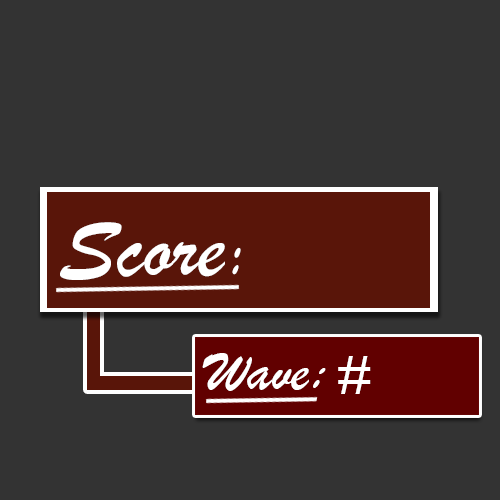
<style>
.page{position:relative;width:500px;height:500px;background:#333333}
.page>*{position:absolute;margin:0}
.t1{font:90px "BrushScriptMT";color:#ffffff}
.t2{font:72px "BrushScriptMT";color:#ffffff}
.t3{font:60px "BrushScriptMT";color:#ffffff}
.t4{font:60.1px "BrushScriptMT";color:#ffffff}
</style>
<div class="page">
<p class="t1" style="left:60px;top:222px;width:165px;height:58px">Score</p>
<p class="t2" style="left:232px;top:247px;width:9px;height:28px;rotate:-18deg">:</p>
<p class="t3" style="left:202px;top:353px;width:107px;height:38px">Wave</p>
<p class="t3" style="left:338px;top:356px;width:33px;height:38px">#</p>
<p class="t4" style="left:313px;top:368px;width:13px;height:20px;rotate:180deg">:</p>
</div>
